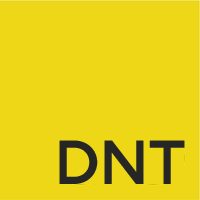
<style>
.page{position:relative;width:200px;height:200px;background:#edd717}
.page>*{position:absolute;margin:0}
.t1{font:62px "P22UndergroundPro-Demi";color:#262624}
</style>
<div class="page">
<p class="t1" style="left:59px;top:140px;width:126px;height:44px">DNT</p>
</div>
